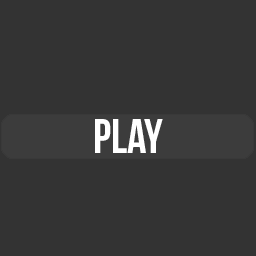
<style>
.page{position:relative;width:256px;height:256px;background:#333333}
.page>*{position:absolute;margin:0}
.t1{font:47.7px "BebasNeue";color:#ffffff}
</style>
<div class="page">
<p class="t1" style="left:95px;top:119px;width:68px;height:34px">Play</p>
</div>
